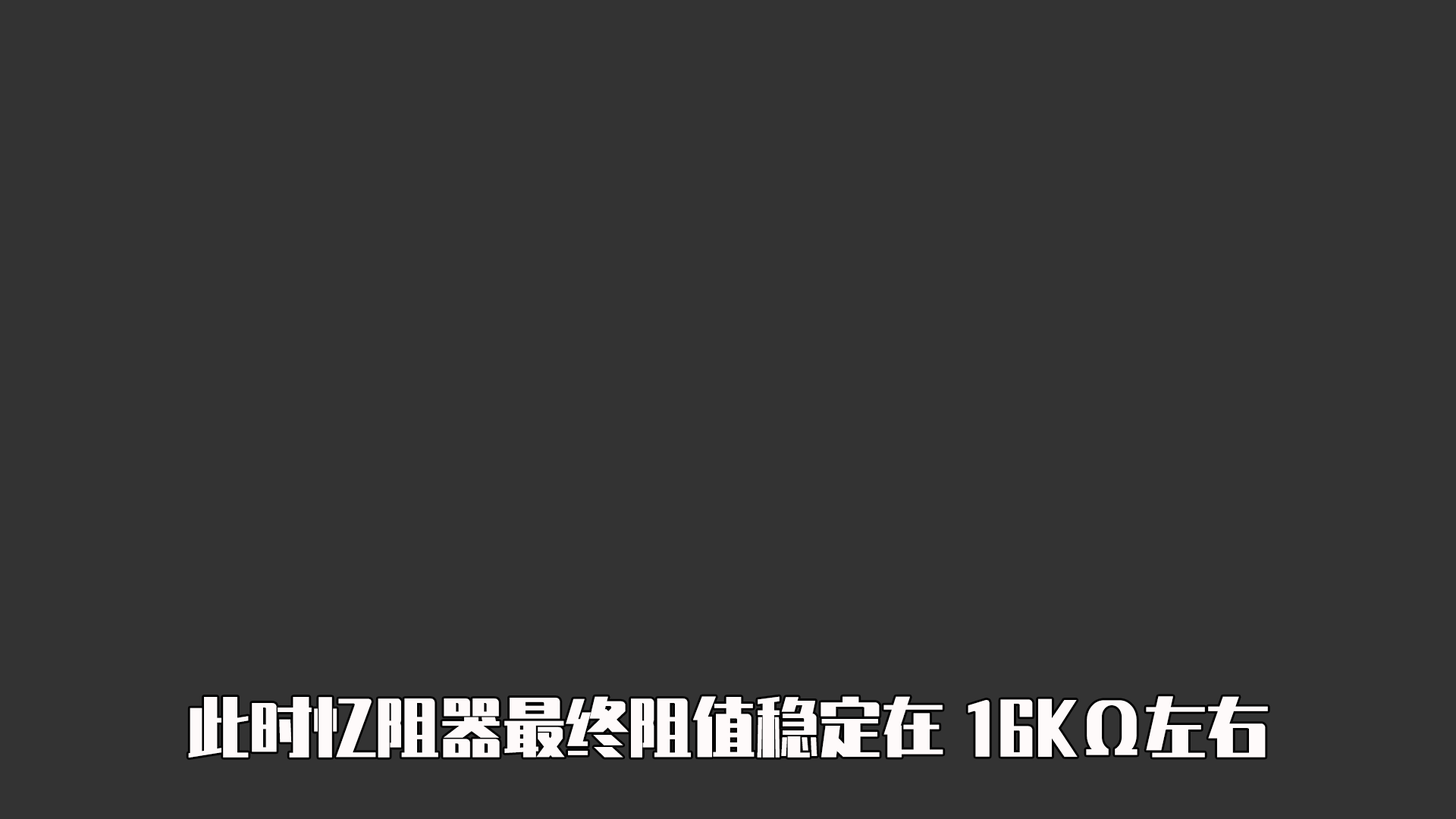
<style>
.page{position:relative;width:1456px;height:819px;background:#333333}
.page>*{position:absolute;margin:0}
.t1{font:63.2px "ZhenyanGB-Regular";color:#fefafa}
</style>
<div class="page">
<p class="t1" style="left:188px;top:696px;width:1080px;height:62px">此时忆阻器最终阻值稳定在16KΩ左右</p>
</div>
